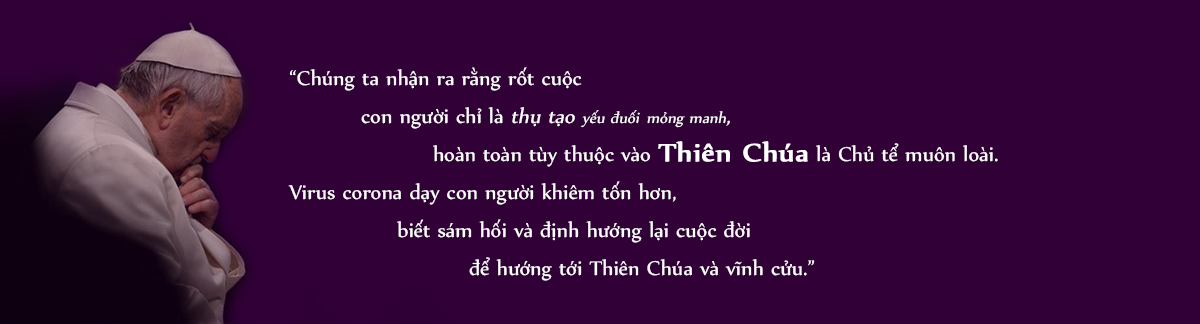
<style>
.page{position:relative;width:1200px;height:324px;background:#300037}
.page>*{position:absolute;margin:0}
.t1{font:24px/38px "UTM-Nyala";color:#ffffff}
.t2{font:24px/38px "UTM-Nyala";color:#ffffff;font-style:italic}
.t3{font:18px/38px "UTM-Nyala";color:#ffffff;font-style:italic}
.t4{font:30px/38px "UTM-Nyala";color:#ffffff;font-weight:bold;scale:1.1 1}
</style>
<div class="page">
<p class="t1" style="left:288px;top:67px;width:710px;height:214px">“Chúng ta nhận ra rằng rốt cuộc<br>  con người chỉ là <span class="t2">thụ tạo </span><span class="t3">yếu đuối mỏng manh</span><span class="t2">,</span><br>    hoàn toàn tùy thuộc vào <span class="t4">Thiên Chúa</span> là Chủ tể muôn loài.<br>Virus corona dạy con người khiêm tốn hơn,<br>   biết sám hối và định hướng lại cuộc đời<br>     để hướng tới Thiên Chúa và vĩnh cửu.”</p>
</div>
